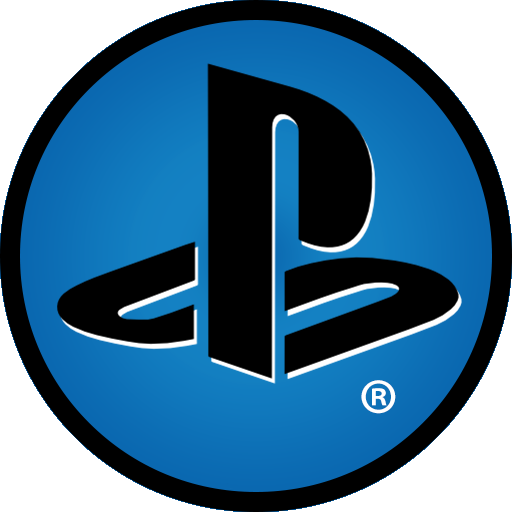
<style>
.page{position:relative;width:512px;height:512px;background:#000000}
.page>*{position:absolute;margin:0}
.t1{font:100px "MyriadPro-Regular";color:#ffffff}
</style>
<div class="page">
<p class="t1" style="left:361px;top:380px;width:35px;height:34px">®</p>
</div>
